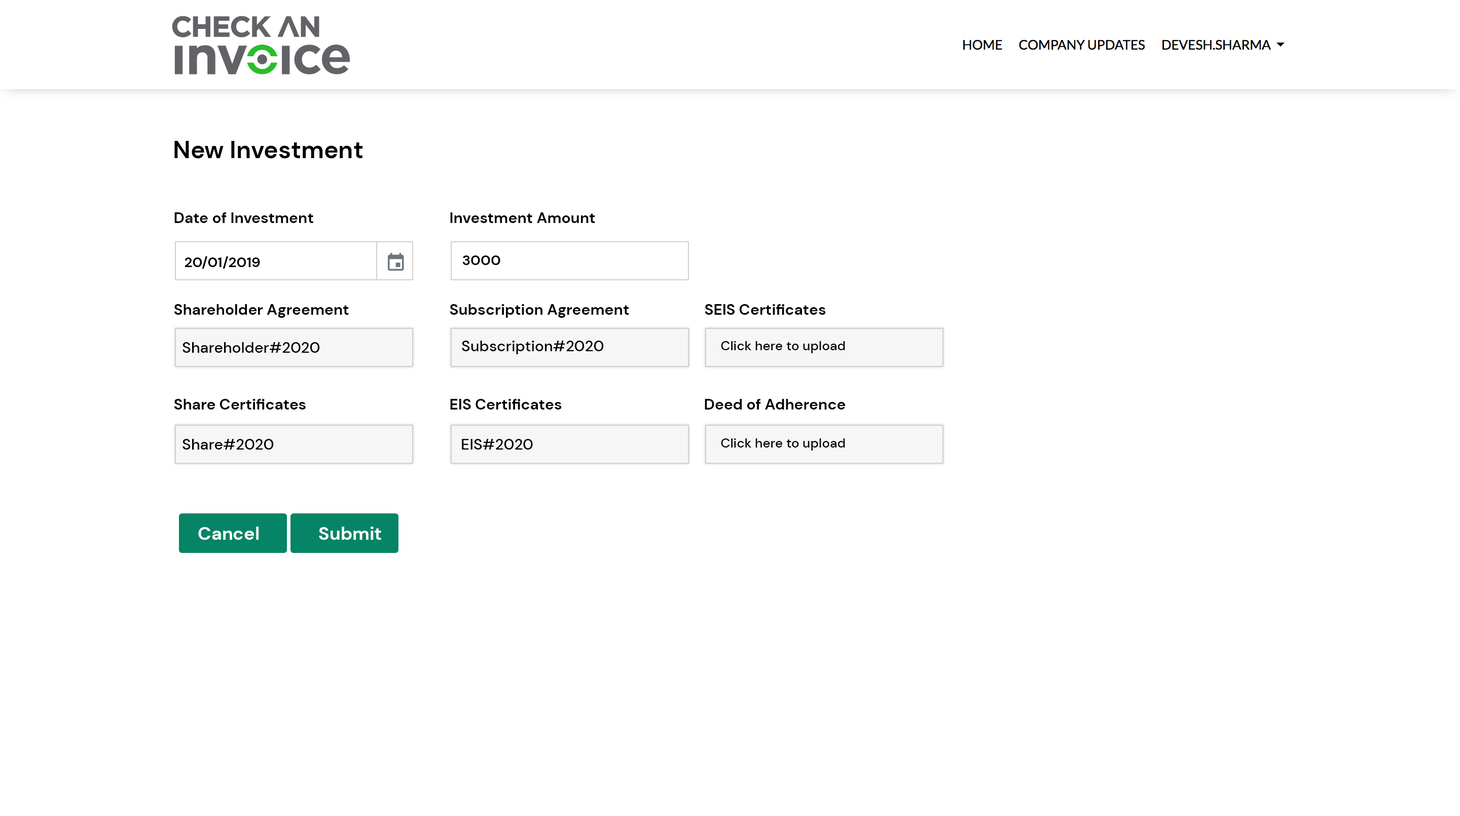
<style>
.page{position:relative;width:1460px;height:816px;background:#ffffff}
.page>*{position:absolute;margin:0}
.t1{font:24.3px "DMSans-Bold";color:#000000}
.t2{font:15.2px "DMSans-Bold";color:#000000}
.t3{font:14.2px "DMSans-Bold";color:#000000}
.t4{font:15.2px "DMSans-Medium";color:#000000}
.t5{font:13.2px "DMSans-Medium";color:#000000}
.t6{font:18.3px "DMSans-Bold";color:#ffffff}
</style>
<div class="page">
<p class="t1" style="left:174px;top:141px;width:189px;height:18px">New Investment</p>
<p class="t2" style="left:174px;top:212px;width:139px;height:11px">Date of Investment</p>
<p class="t2" style="left:450px;top:212px;width:145px;height:11px">Investment Amount</p>
<p class="t3" style="left:185px;top:256px;width:75px;height:13px">20/01/2019</p>
<p class="t3" style="left:462px;top:256px;width:39px;height:9px">3000</p>
<p class="t2" style="left:174px;top:304px;width:175px;height:14px">Shareholder Agreement</p>
<p class="t2" style="left:450px;top:304px;width:179px;height:14px">Subscription Agreement</p>
<p class="t2" style="left:705px;top:304px;width:121px;height:11px">SEIS Certificates</p>
<p class="t4" style="left:462px;top:341px;width:142px;height:13px">Subscription#2020</p>
<p class="t5" style="left:721px;top:341px;width:124px;height:12px">Click here to upload</p>
<p class="t4" style="left:183px;top:342px;width:137px;height:11px">Shareholder#2020</p>
<p class="t2" style="left:174px;top:399px;width:132px;height:11px">Share Certificates</p>
<p class="t2" style="left:450px;top:399px;width:112px;height:11px">EIS Certificates</p>
<p class="t2" style="left:705px;top:399px;width:141px;height:11px">Deed of Adherence</p>
<p class="t4" style="left:183px;top:439px;width:91px;height:11px">Share#2020</p>
<p class="t4" style="left:462px;top:439px;width:71px;height:11px">EIS#2020</p>
<p class="t5" style="left:721px;top:439px;width:124px;height:12px">Click here to upload</p>
<p class="t6" style="left:198px;top:527px;width:61px;height:13px">Cancel</p>
<p class="t6" style="left:319px;top:527px;width:62px;height:13px">Submit</p>
</div>
